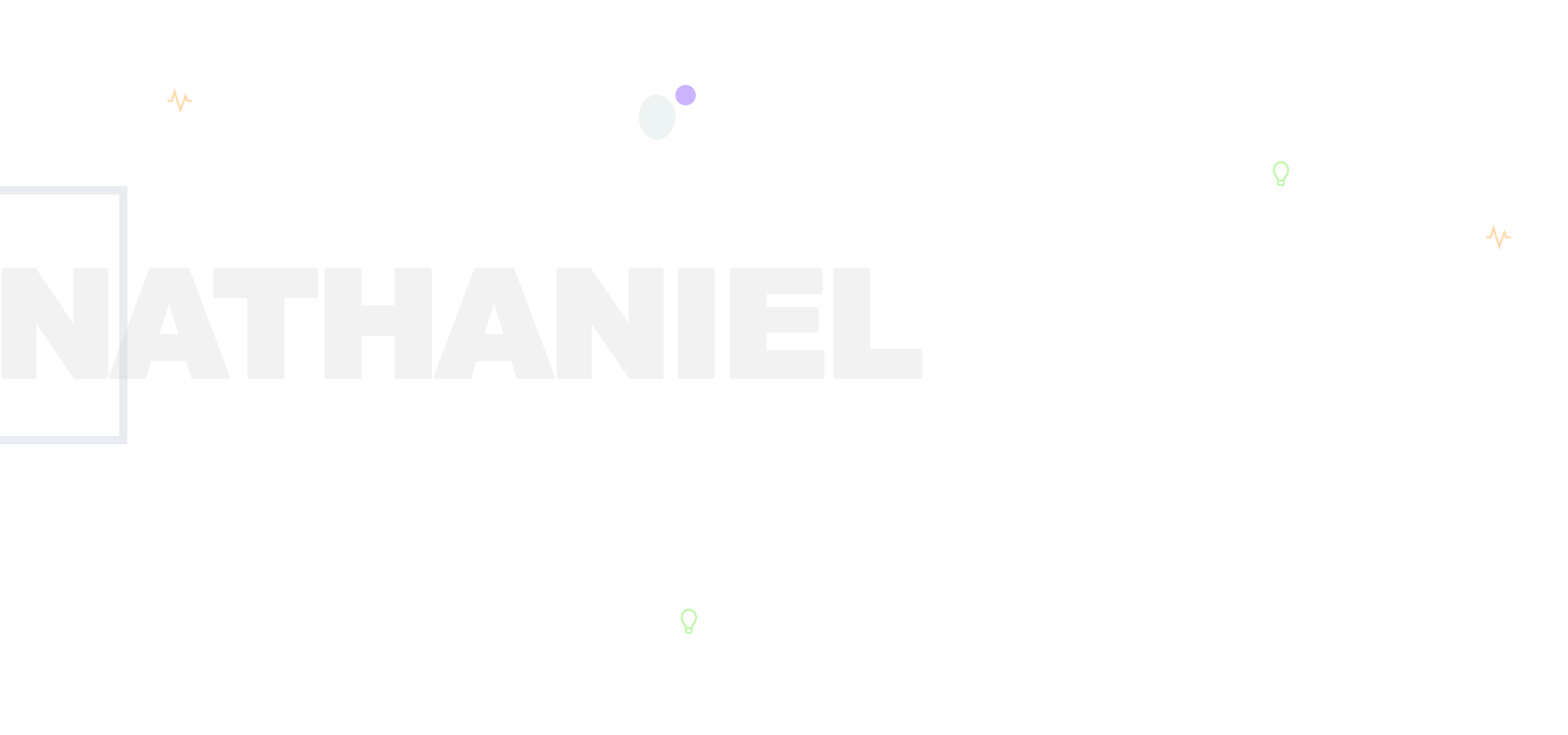
<style>
.page{position:relative;width:1568px;height:735px;background:#ffffff}
.page>*{position:absolute;margin:0}
.t1{font:151.2px "Arial-Black";letter-spacing:-0.1em;color:#f2f2f2;text-transform:uppercase;font-weight:bold}
</style>
<div class="page">
<p class="t1" style="left:1px;top:267px;width:922px;height:113px">NATHANIEL</p>
</div>
